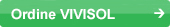
<style>
.page{position:relative;width:170px;height:27px;background:#33b655}
.page>*{position:absolute;margin:0}
.t1{font:14px "Arial-BoldMT";color:#ffffff}
</style>
<div class="page">
<p class="t1" style="left:11px;top:8px;width:104px;height:12px">Ordine VIVISOL</p>
</div>
